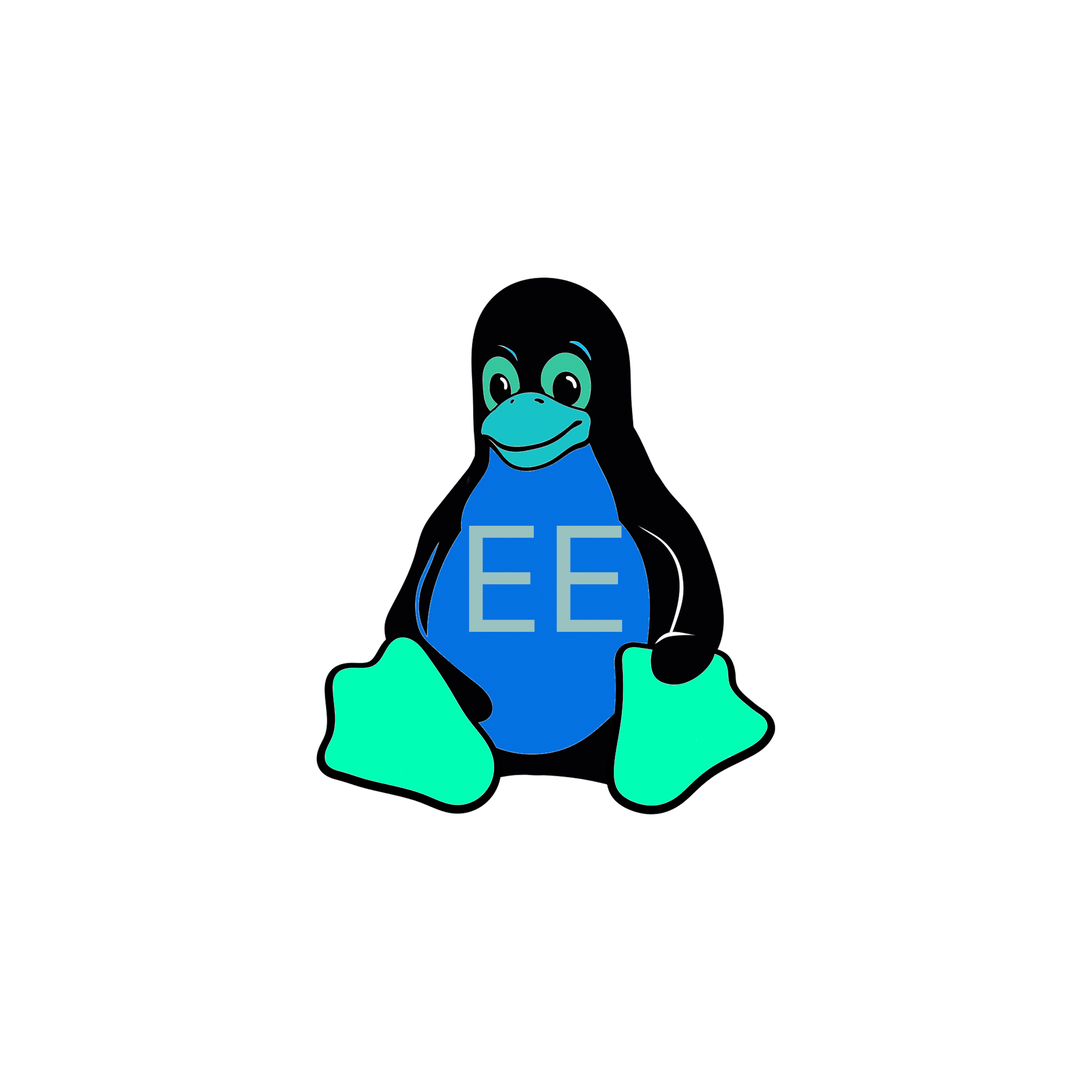
<style>
.page{position:relative;width:1092px;height:1092px;background:#ffffff}
.page>*{position:absolute;margin:0}
.t1{font:145.8px "Inter-Regular";color:#9ac2c1}
</style>
<div class="page">
<p class="t1" style="left:469px;top:526px;width:153px;height:106px">EE</p>
</div>
